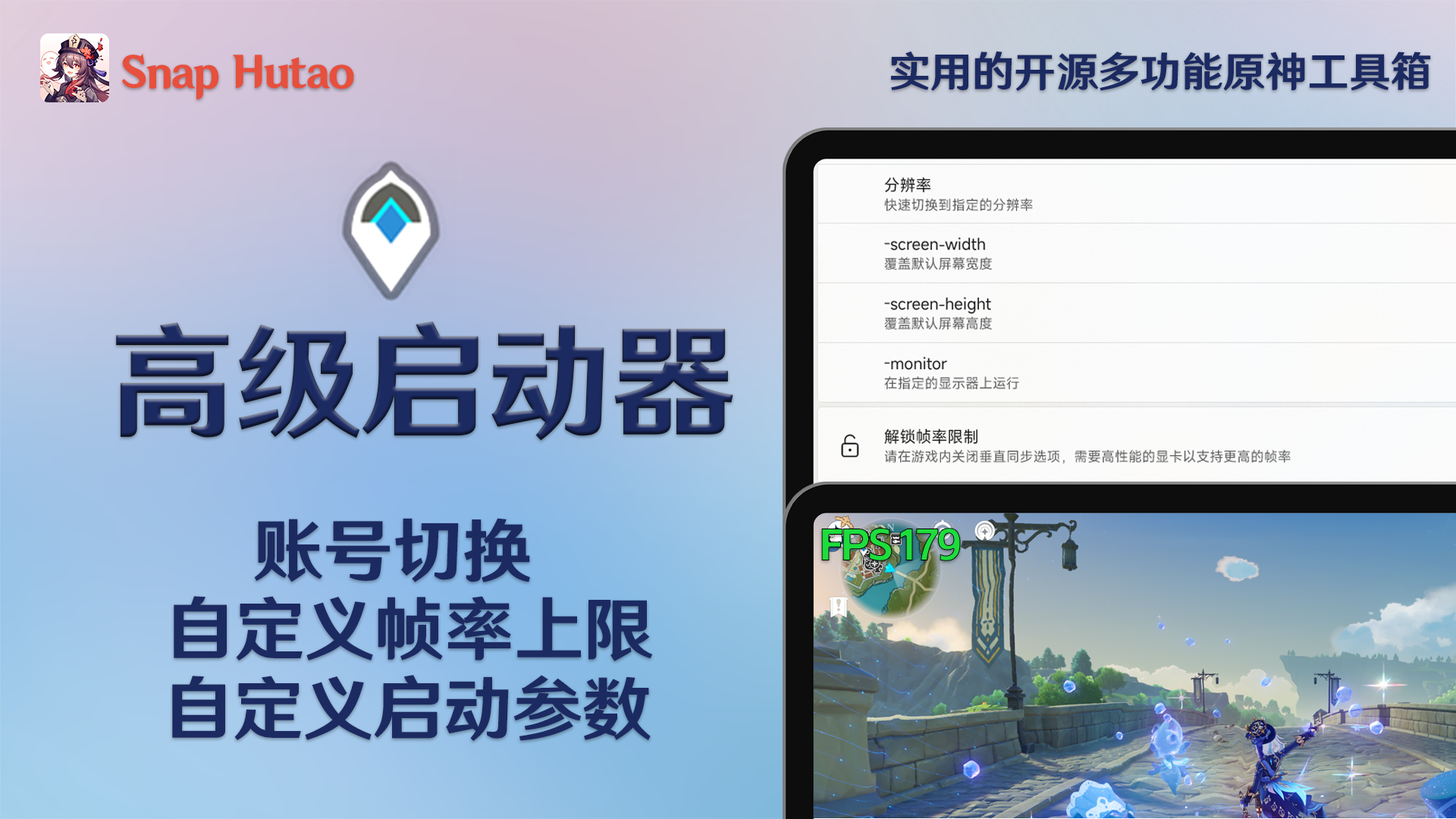
<style>
.page{position:relative;width:1456px;height:819px}
.page>*{position:absolute;margin:0}
.t1{font:45.5px "HYWenHei-85W";letter-spacing:-0.01em;color:#e6503d}
.t2{font:45.5px "HYWenHei-85W";color:#1c2a62}
.t3{font:136.5px "HYWenHei-85W";color:#1c2a62}
.t4{font:75.8px "HYWenHei-85W";color:#1c2a62}
.t5{font:45.5px "AlimamaShuHeiTi-Bold";letter-spacing:-0.075em;color:#1ddd3c}
</style>
<div class="page">
<p class="t1" style="left:122px;top:53px;width:232px;height:46px">Snap Hutao</p>
<p class="t2" style="left:891px;top:51px;width:540px;height:40px">实用的开源多功能原神工具箱</p>
<p class="t3" style="left:116px;top:321px;width:617px;height:120px">高级启动器</p>
<p class="t4" style="left:254px;top:518px;width:276px;height:64px">账号切换</p>
<p class="t5" style="left:821px;top:528px;width:140px;height:33px">FPS 179</p>
<p class="t4" style="left:174px;top:596px;width:479px;height:65px">自定义帧率上限</p>
<p class="t4" style="left:172px;top:675px;width:479px;height:66px">自定义启动参数</p>
</div>
